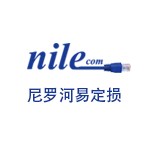
<style>
.page{position:relative;width:144px;height:144px;background:#ffffff}
.page>*{position:absolute;margin:0}
.t1{font:16.1px "AdobeHeitiStd-Regular";letter-spacing:-0.02em;color:#183a94}
</style>
<div class="page">
<p class="t1" style="left:27px;top:87px;width:94px;height:16px">尼罗河易定损</p>
</div>
